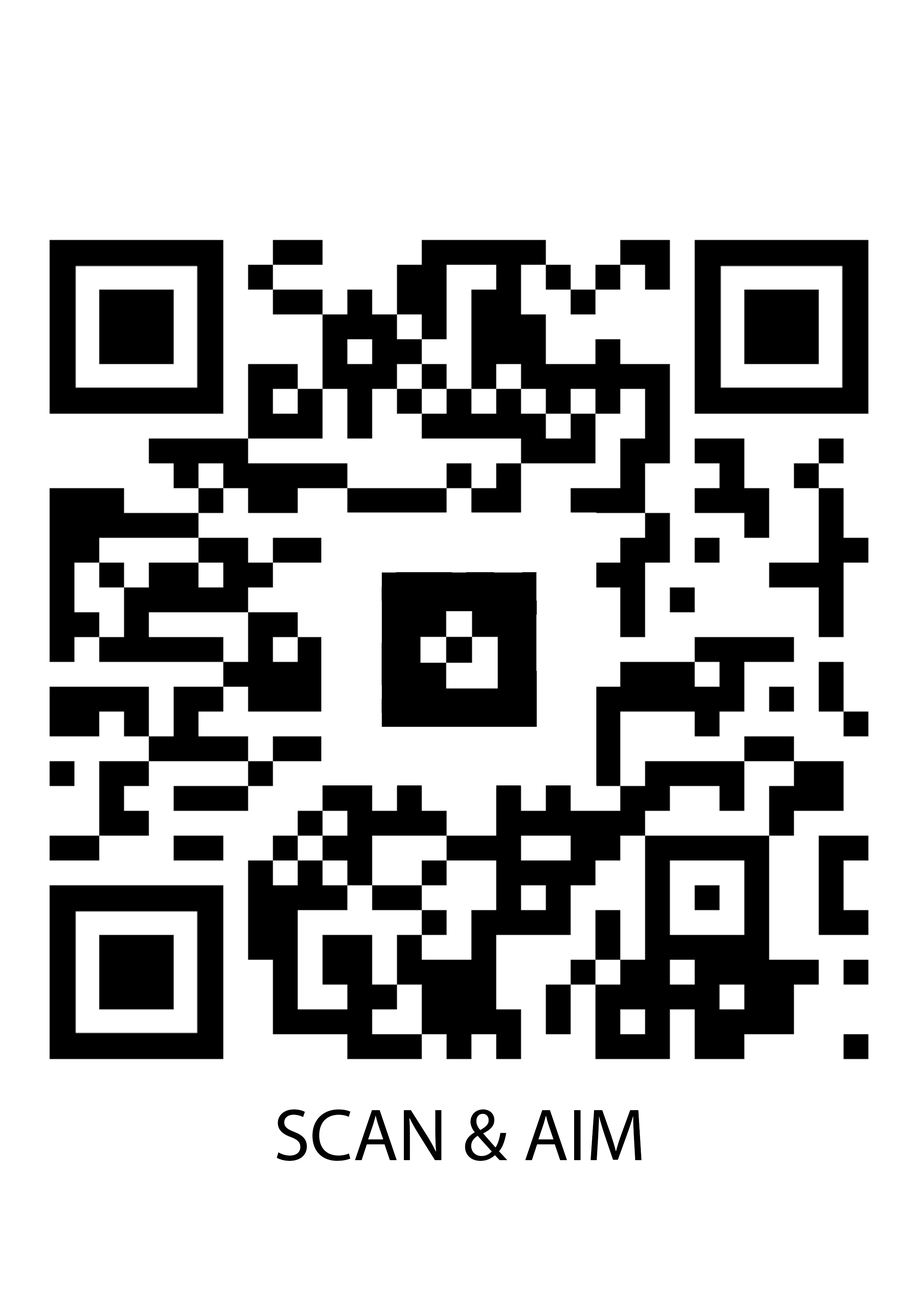
<style>
.page{position:relative;width:918px;height:1299px;background:#ffffff}
.page>*{position:absolute;margin:0}
.t1{font:74px "MyriadPro-Regular";color:#000000}
</style>
<div class="page">
<p class="t1" style="left:277px;top:1109px;width:365px;height:52px">SCAN &amp; AIM</p>
</div>
